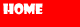
<style>
.page{position:relative;width:80px;height:27px;background:#ff0000}
.page>*{position:absolute;margin:0}
.t1{font:14px "ShowcardGothic-Reg";color:#ffffff}
</style>
<div class="page">
<p class="t1" style="left:3px;top:3px;width:40px;height:12px">HOME</p>
</div>
